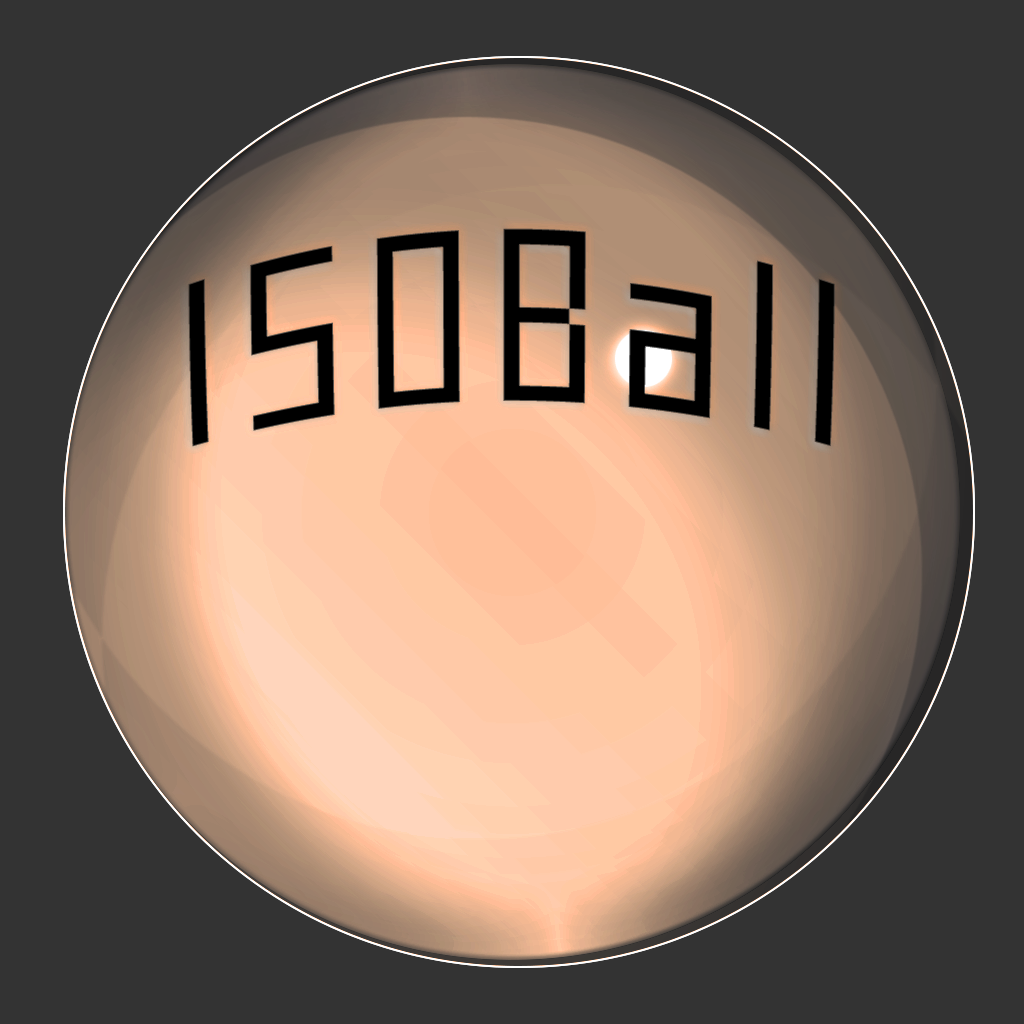
<style>
.page{position:relative;width:1024px;height:1024px;background:#333333}
.page>*{position:absolute;margin:0}
.t1{font:130px "Mecha";letter-spacing:0.05em;color:#000000}
</style>
<div class="page">
<p class="t1" style="left:188px;top:228px;width:647px;height:219px">ISOBall</p>
</div>
